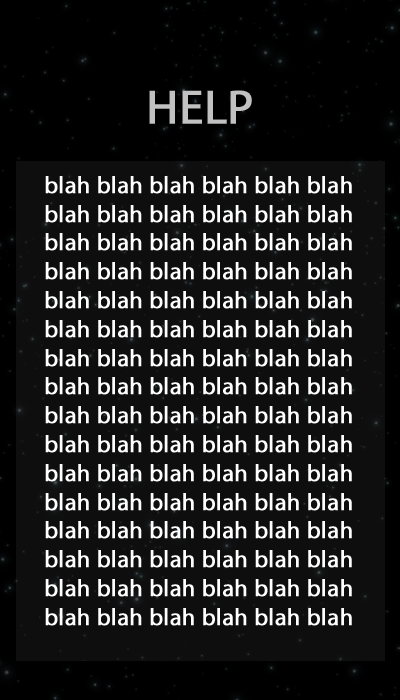
<style>
.page{position:relative;width:400px;height:700px;background:#0e0e0e}
.page>*{position:absolute;margin:0}
.t1{font:48px "MyriadPro-Regular";color:#c1c1c1;font-weight:bold}
.t2{font:24px "MyriadPro-Regular";color:#ffffff;font-weight:bold}
</style>
<div class="page">
<p class="t1" style="left:149px;top:90px;width:103px;height:34px">HELP</p>
<p class="t2" style="left:45px;top:176px;width:307px;height:450px;text-align:center">blah blah blah blah blah blah blah blah blah blah blah blah blah blah blah blah blah blah blah blah blah blah blah blah blah blah blah blah blah blah blah blah blah blah blah blah blah blah blah blah blah blah blah blah blah blah blah blah blah blah blah blah blah blah blah blah blah blah blah blah blah blah blah blah blah blah blah blah blah blah blah blah blah blah blah blah blah blah blah blah blah blah blah blah blah blah blah blah blah blah blah blah blah blah blah blah blah blah blah</p>
</div>
